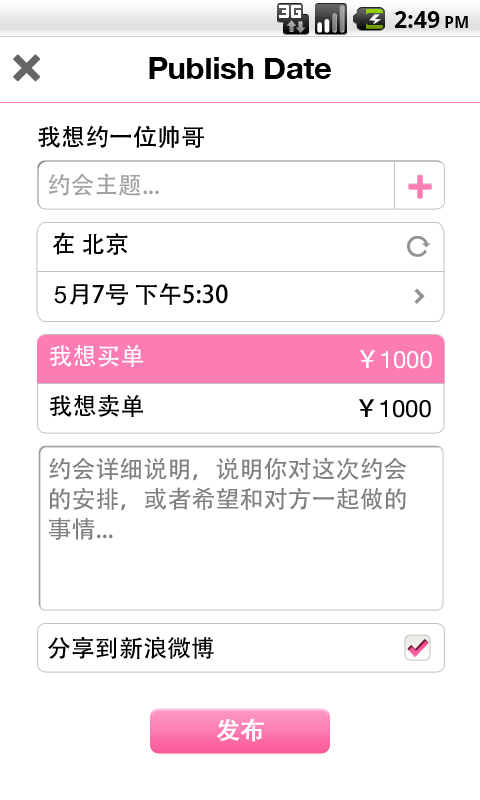
<style>
.page{position:relative;width:480px;height:800px;background:#ffffff}
.page>*{position:absolute;margin:0}
.t1{font:30px "HelveticaNeue-Bold";color:#000000}
.t2{font:24px "AdobeHeitiStd-Regular";color:#000000}
.t3{font:24px "AdobeHeitiStd-Regular";color:#a1a1a1}
.t4{font:24px "HelveticaNeue";color:#000000}
.t5{font:24px "AdobeHeitiStd-Regular";color:#ffffff}
.t6{font:24px "HelveticaNeue";color:#ffffff}
.t7{font:24px/30px "AdobeHeitiStd-Regular";color:#7f7f7f}
.t8{font:24px "AdobeHeitiStd-Regular";color:#ffffff;font-weight:bold}
</style>
<div class="page">
<p class="t1" style="left:149px;top:57px;width:182px;height:22px">Publish Date</p>
<p class="t2" style="left:38px;top:125px;width:166px;height:23px">我想约一位帅哥</p>
<p class="t3" style="left:48px;top:173px;width:111px;height:23px">约会主题...</p>
<p class="t2" style="left:52px;top:232px;width:76px;height:23px">在 北京</p>
<p class="t2" style="left:54px;top:283px;width:174px;height:23px"><span class="t4">5</span>月7号 下午5:30</p>
<p class="t5" style="left:49px;top:344px;width:94px;height:23px">我想买单</p>
<p class="t6" style="left:360px;top:350px;width:72px;height:19px"><span class="t5">￥</span>1000</p>
<p class="t2" style="left:49px;top:394px;width:94px;height:23px">我想卖单</p>
<p class="t4" style="left:359px;top:399px;width:72px;height:19px"><span class="t2">￥</span>1000</p>
<p class="t7" style="left:49px;top:457px;width:358px;height:83px">约会详细说明，说明你对这次约会的安排，或者希望和对方一起做的事情...</p>
<p class="t2" style="left:48px;top:636px;width:166px;height:23px">分享到新浪微博</p>
<p class="t8" style="left:216px;top:718px;width:48px;height:24px">发布</p>
</div>
